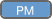
<style>
.page{position:relative;width:52px;height:19px;background:#6699cc}
.page>*{position:absolute;margin:0}
.t1{font:12px "HelveticaNeue";color:#ffffff}
</style>
<div class="page">
<p class="t1" style="left:17px;top:6px;width:17px;height:9px">PM</p>
</div>
